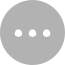
<style>
.page{position:relative;width:65px;height:65px;background:#b2b2b2}
.page>*{position:absolute;margin:0}
.t1{font:49px "ArialRoundedMTBold";letter-spacing:-0.025em;color:#ffffff}
</style>
<div class="page">
<p class="t1" style="left:14px;top:29px;width:37px;height:8px">...</p>
</div>
